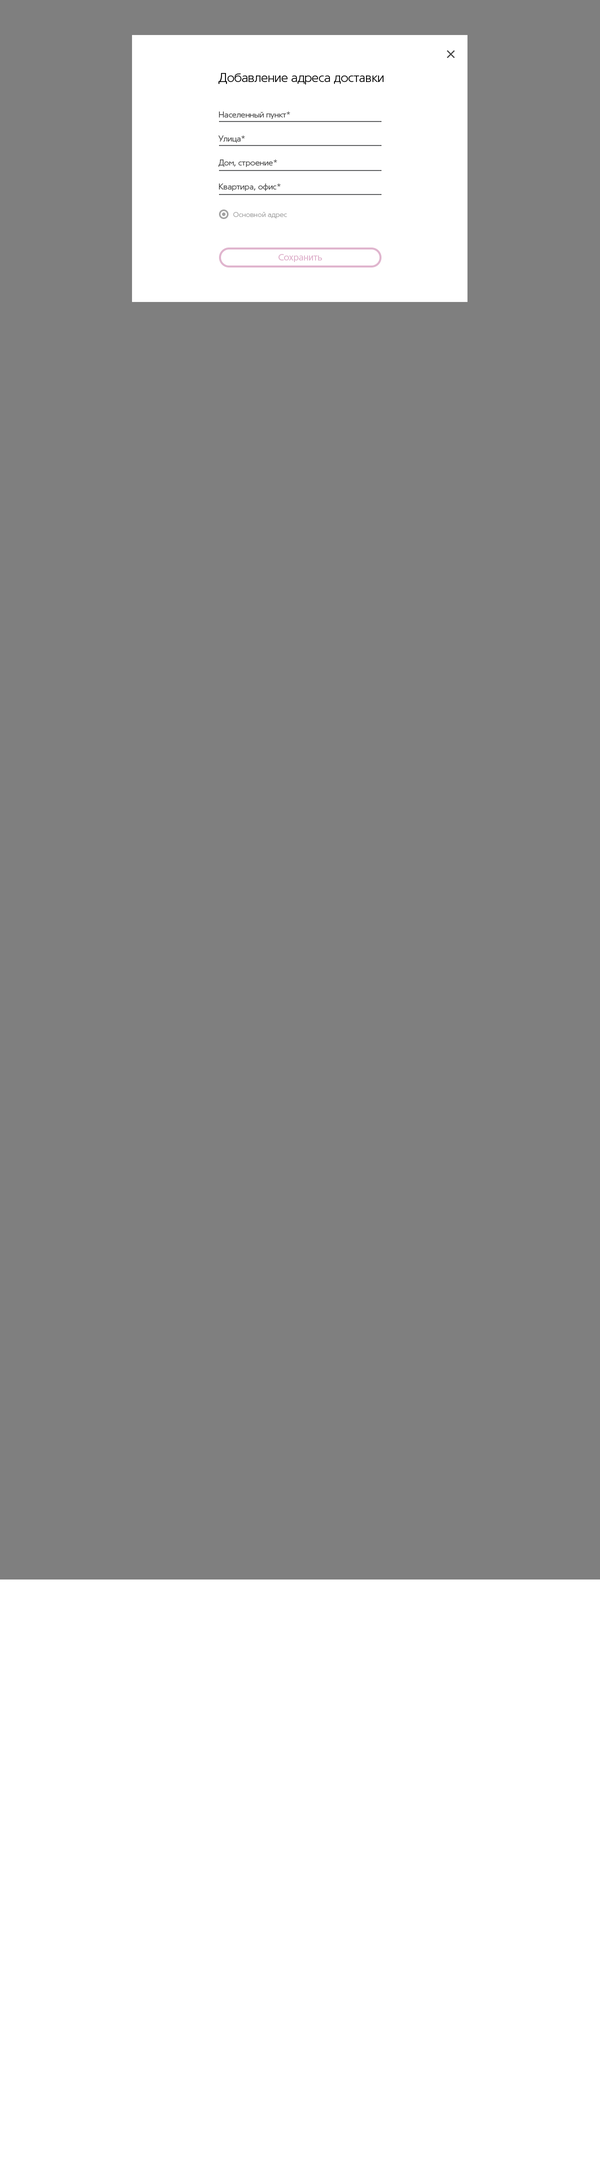
<style>
.page{position:relative;width:600px;height:2172px;background:#7f7f7f}
.page>*{position:absolute;margin:0}
.t1{font:19.9px "TornadoCyr-Light";color:#414141}
.t2{font:12.1px "TornadoCyr-Light";color:#000000}
.t3{font:8px/12px "TornadoCyr-Light";color:#414141}
.t4{font:7px "TornadoCyr-Light";color:#a1a1a1}
.t5{font:9px "TornadoCyr-Regular";color:#e0b5ce}
</style>
<div class="page">
<p class="t1" style="left:447px;top:50px;width:8px;height:9px;rotate:45deg">+</p>
<p class="t2" style="left:219px;top:73px;width:165px;height:12px">Добавление адреса доставки</p>
<p class="t3" style="left:219px;top:112px;width:71px;height:79px">Населенный пункт*<br><br>Улица*<br><br>Дом, строение*<br><br>Квартира, офис*</p>
<p class="t4" style="left:233px;top:212px;width:54px;height:7px">Основной адрес</p>
<p class="t5" style="left:279px;top:254px;width:43px;height:8px">Сохранить</p>
</div>
